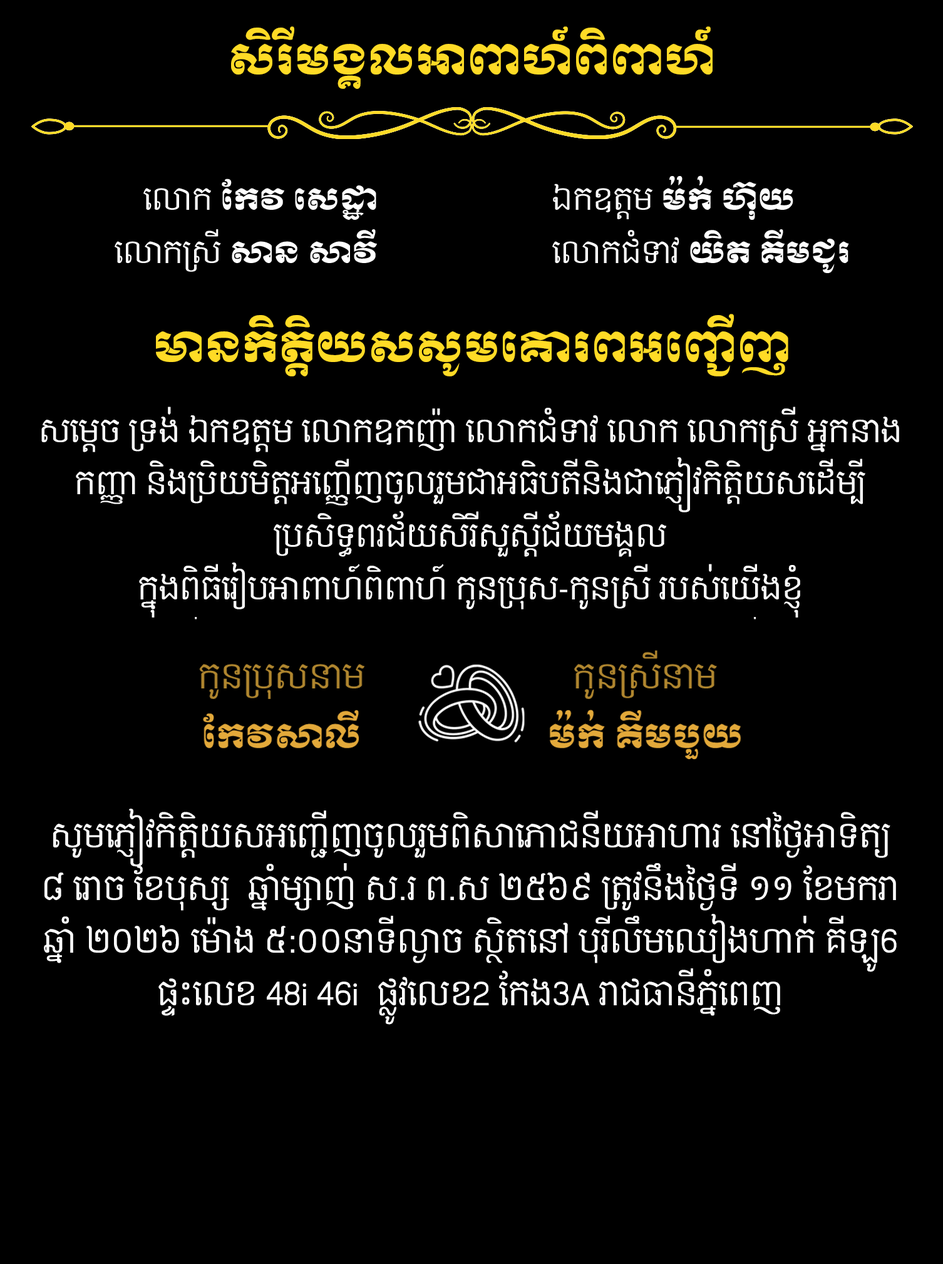
<style>
.page{position:relative;width:943px;height:1264px;background:#000000}
.page>*{position:absolute;margin:0}
.t1{font:41.8px "KhmerOSMoul";color:#ffdb26}
.t2{font:30.7px/52.5px "KhmerOSContent";color:#ffffff}
.t3{font:32.3px/52.5px "KhmerOSContent";color:#ffffff}
.t4{font:32.3px/52.5px "MyriadPro-Regular";color:#ffffff}
</style>
<div class="page">
<p class="t1" style="left:231px;top:26px;width:482px;height:63px">សិរីមង្គលអាពាហ៍ពិពាហ៍</p>
<p class="t1" style="left:156px;top:314px;width:633px;height:62px">មានកិត្តិយសសូមគោរពអញ្ជើញ</p>
<p class="t2" style="left:41px;top:407px;width:858px;height:211px;text-align:center">សម្ដេច ទ្រង់ ឯកឧត្ដម លោកឧកញ៉ា លោកជំទាវ លោក លោកស្រី អ្នកនាង កញ្ញា និងប្រិយមិត្តអញ្ញើញចូលរួមជាអធិបតីនិងជាភ្ញៀវកិត្តិយសដើម្បីប្រសិទ្ធពរជ័យសិរីសួស្ដីជ័យមង្គល<br>ក្នុងពិធីរៀបអាពាហ៍ពិពាហ៍ កូនប្រុស-កូនស្រី របស់យើងខ្ញុំ</p>
<p class="t3" style="left:44px;top:809px;width:853px;height:216px;text-align:center">សូមភ្ញៀវកិត្តិយសអញ្ជើញចូលរួមពិសាភោជនីយអាហារ នៅថ្ងៃអាទិត្យ <br>៨ រោច ខែបុស្ស  ឆ្នាំម្សាញ់ ស.រ ព.ស ២៥៦៩ ត្រូវនឹងថ្ងៃទី ១១ ខែមករា ឆ្នាំ ២០២៦ ម៉ោង ៥:០០នាទីល្ងាច ស្ថិតនៅ បុរីលឹមឈៀងហាក់ គីឡូ6 <br>ផ្ទះលេខ 48<span class="t4">i</span> 46<span class="t4">i</span>  ផ្លូវលេខ2 កែង3<span class="t4">A</span> រាជធានីភ្នំពេញ</p>
</div>
